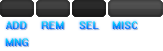
<style>
.page{position:relative;width:163px;height:51px;background:#ffffff}
.page>*{position:absolute;margin:0}
.t1{font:9px "System";letter-spacing:0.05em}
</style>
<div class="page">
<p class="t1" style="left:6px;top:21px;width:21px;height:8px">ADD</p>
<p class="t1" style="left:41px;top:21px;width:23px;height:8px">REM</p>
<p class="t1" style="left:79px;top:21px;width:20px;height:8px">SEL</p>
<p class="t1" style="left:112px;top:21px;width:25px;height:8px">MISC</p>
<p class="t1" style="left:5px;top:38px;width:23px;height:8px">MNG</p>
</div>
